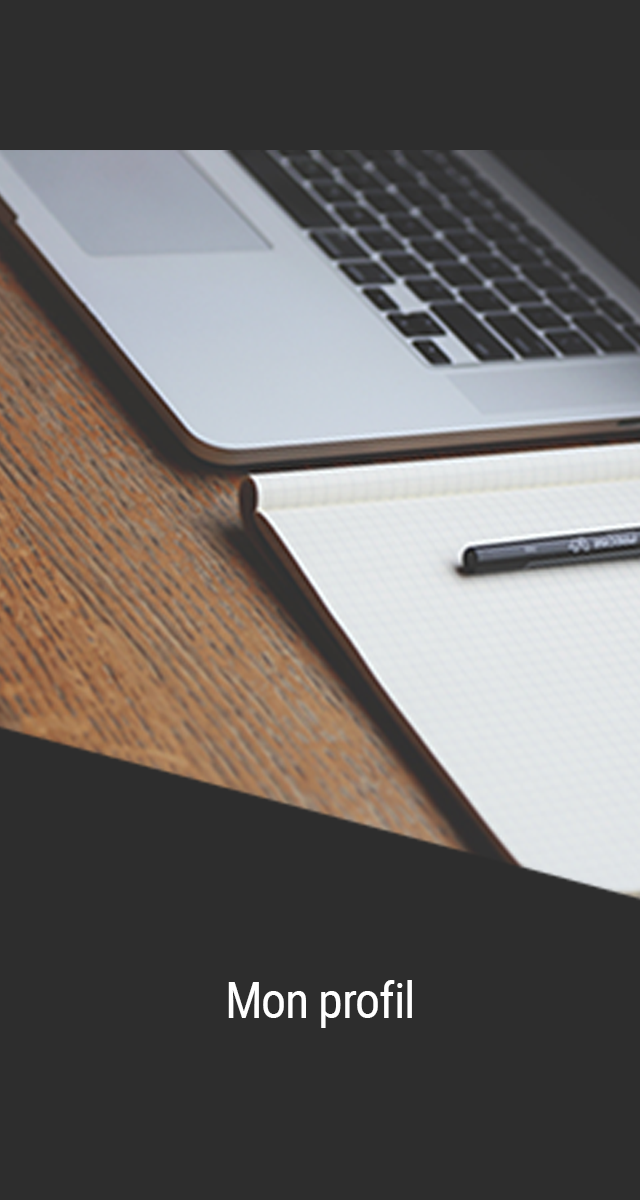
<style>
.page{position:relative;width:640px;height:1200px;background:#2d2d2d}
.page>*{position:absolute;margin:0}
.t1{font:50px "RobotoCondensed-Regular";letter-spacing:-0.025em;color:#ffffff}
</style>
<div class="page">
<p class="t1" style="left:228px;top:980px;width:184px;height:48px">Mon profil</p>
</div>
